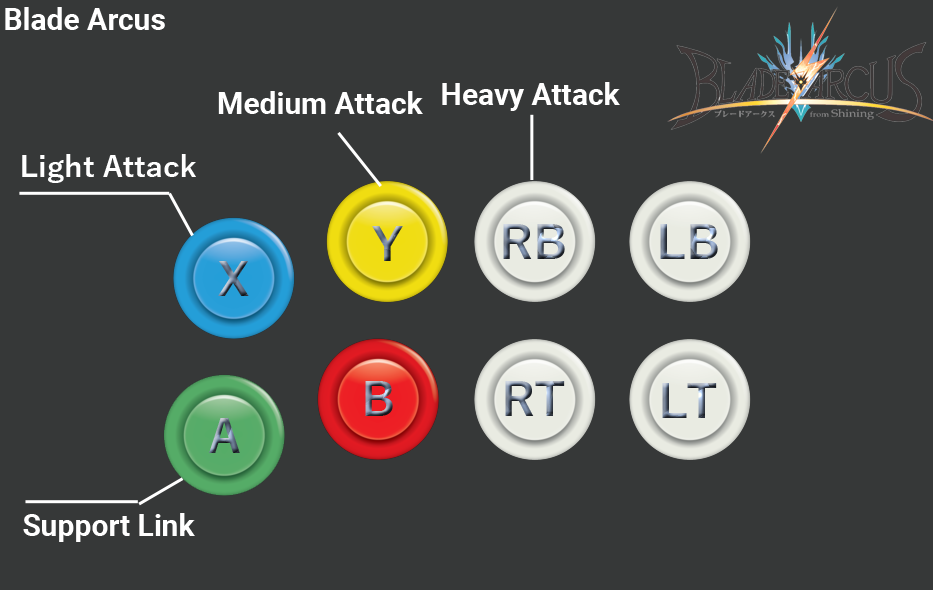
<style>
.page{position:relative;width:933px;height:590px;background:#363838}
.page>*{position:absolute;margin:0}
.t1{font:30px "Roboto-Bold";color:#ffffff}
.t2{font:30px "YuGothic-Bold";color:#ffffff}
</style>
<div class="page">
<p class="t1" style="left:5px;top:7px;width:160px;height:23px">Blade Arcus</p>
<p class="t1" style="left:442px;top:82px;width:178px;height:29px">Heavy Attack</p>
<p class="t1" style="left:218px;top:91px;width:205px;height:23px">Medium Attack</p>
<p class="t2" style="left:22px;top:154px;width:174px;height:29px">Light Attack</p>
<p class="t1" style="left:23px;top:513px;width:172px;height:29px">Support Link</p>
</div>
